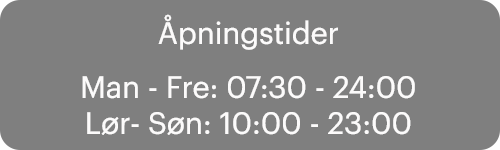
<style>
.page{position:relative;width:500px;height:150px;background:#7f7f7f}
.page>*{position:absolute;margin:0}
.t1{font:30px "false";color:#fcfbfb}
</style>
<div class="page">
<p class="t1" style="left:82px;top:14px;width:333px;height:121px;text-align:center">Åpningstider<br><br><br><br>Man - Fre: 07:30 - 24:00<br>Lør- Søn: 10:00 - 23:00</p>
</div>
